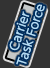
<style>
.page{position:relative;width:50px;height:68px;background:#333333}
.page>*{position:absolute;margin:0}
.t1{font:11.5px/12px "UDShinGoPro-Light";color:#b3ddf6;font-weight:bold}
</style>
<div class="page">
<p class="t1" style="left:9px;top:4px;width:36px;height:61px;text-align:center;rotate:-72deg">Carrier<br>Task Force</p>
</div>
